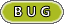
<style>
.page{position:relative;width:64px;height:24px;background:#aabb22}
.page>*{position:absolute;margin:0}
.t1{font:14px "Ebrima-Bold";color:#ffffff}
</style>
<div class="page">
<p class="t1" style="left:14px;top:6px;width:36px;height:11px">B U G</p>
</div>
